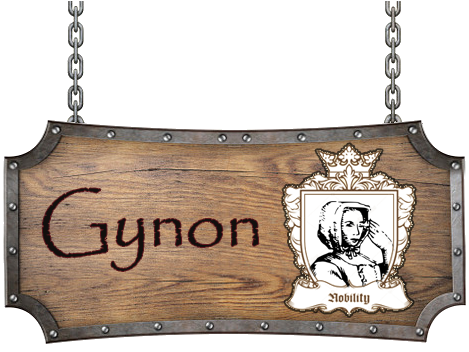
<style>
.page{position:relative;width:469px;height:352px;background:#ffffff}
.page>*{position:absolute;margin:0}
.t1{font:71.8px "Papyrus-Regular";color:#120f0d}
</style>
<div class="page">
<p class="t1" style="left:42px;top:188px;width:217px;height:83px">Gynon</p>
</div>
